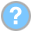
<style>
.page{position:relative;width:32px;height:32px;background:#7cc7ff}
.page>*{position:absolute;margin:0}
.t1{font:24px "HelveticaNeue-Bold";letter-spacing:-0.01em;color:#ffffff}
</style>
<div class="page">
<p class="t1" style="left:9px;top:6px;width:13px;height:19px">?</p>
</div>
